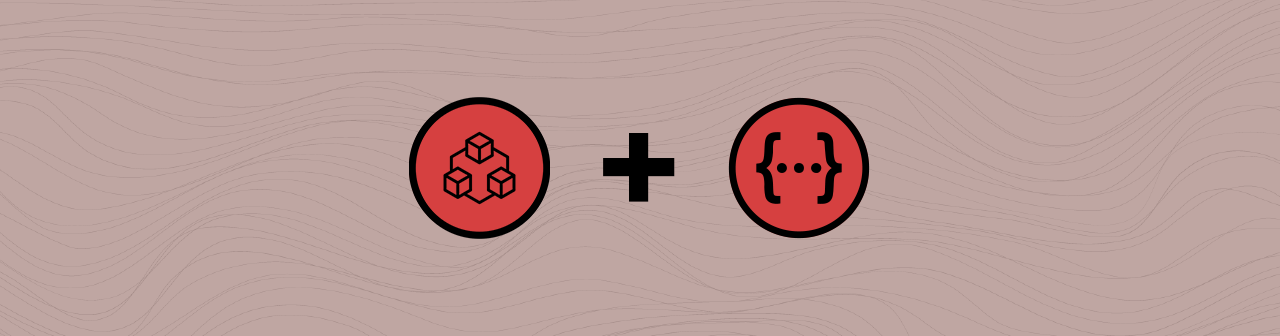
<style>
.page{position:relative;width:1280px;height:336px;background:#bfa6a2}
.page>*{position:absolute;margin:0}
.t1{font:150px "Montserrat-Bold";color:#000000}
</style>
<div class="page">
<p class="t1" style="left:603px;top:133px;width:72px;height:69px">+</p>
</div>
